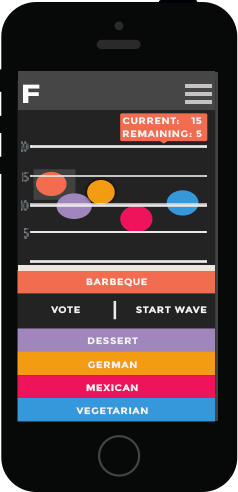
<style>
.page{position:relative;width:238px;height:492px;background:#070808}
.page>*{position:absolute;margin:0}
.t1{font:26px "Montserrat-Bold";letter-spacing:0.06em;color:#ffffff;text-transform:uppercase;scale:1.31 1}
.t2{font:9.2px "Montserrat-Bold";letter-spacing:0.06em;color:#ffffff;text-transform:uppercase;scale:1.09 1}
.t3{font:12.2px "Arvo";letter-spacing:0.01em;color:#828890;scale:0.45 1}
.t4{font:12.8px "Arvo";letter-spacing:0.01em;color:#828890;scale:0.45 1}
</style>
<div class="page">
<p class="t1" style="left:23px;top:84px;width:17px;height:19px">f</p>
<p class="t2" style="left:122px;top:117px;width:57px;height:8px">Current:</p>
<p class="t2" style="left:191px;top:117px;width:11px;height:8px">15</p>
<p class="t2" style="left:122px;top:130px;width:80px;height:8px">Remaining: 5</p>
<p class="t3" style="left:21px;top:141px;width:8px;height:11px">20</p>
<p class="t3" style="left:22px;top:172px;width:7px;height:10px">15</p>
<p class="t3" style="left:21px;top:200px;width:8px;height:11px">10</p>
<p class="t4" style="left:24px;top:228px;width:5px;height:11px">5</p>
<p class="t2" style="left:86px;top:278px;width:61px;height:9px">barbeque</p>
<p class="t2" style="left:51px;top:306px;width:29px;height:8px">vote</p>
<p class="t2" style="left:136px;top:306px;width:71px;height:8px">start wave</p>
<p class="t2" style="left:87px;top:337px;width:51px;height:8px">dessert</p>
<p class="t2" style="left:88px;top:361px;width:49px;height:8px">German</p>
<p class="t2" style="left:86px;top:384px;width:52px;height:8px">mexican</p>
<p class="t2" style="left:76px;top:407px;width:72px;height:8px">Vegetarian</p>
</div>
